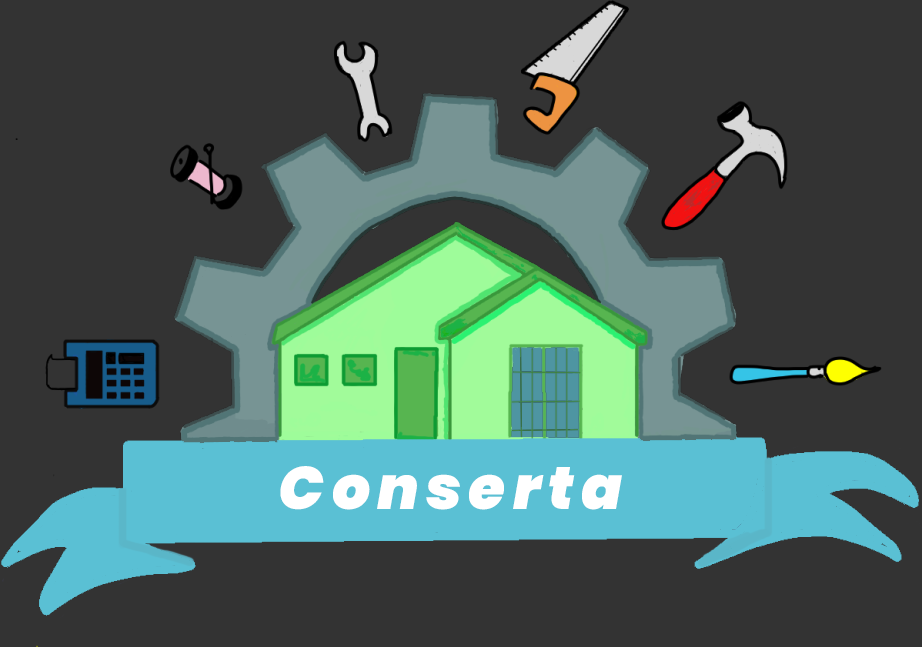
<style>
.page{position:relative;width:922px;height:647px;background:#333333}
.page>*{position:absolute;margin:0}
.t1{font:60px "Poppins-BlackItalic";letter-spacing:0.12em;color:#ffffff}
</style>
<div class="page">
<p class="t1" style="left:280px;top:466px;width:342px;height:44px">Conserta</p>
</div>
